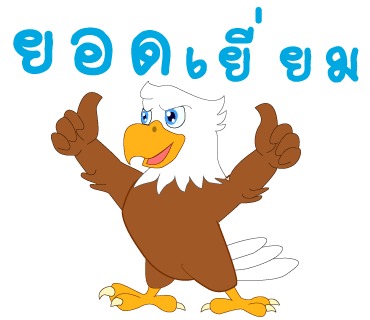
<style>
.page{position:relative;width:370px;height:320px;background:#ffffff}
.page>*{position:absolute;margin:0}
.t1{font:98px "2005_iannnnnMTV";letter-spacing:0.075em;color:#00a8e1;scale:1.06 1}
.t2{font:124px "2005_iannnnnMTV";letter-spacing:0.075em;color:#00a8e1;scale:1.06 1}
</style>
<div class="page">
<p class="t1" style="left:186px;top:6px;width:173px;height:77px">เยี่ยม</p>
<p class="t2" style="left:13px;top:27px;width:158px;height:49px">ยอด</p>
</div>
